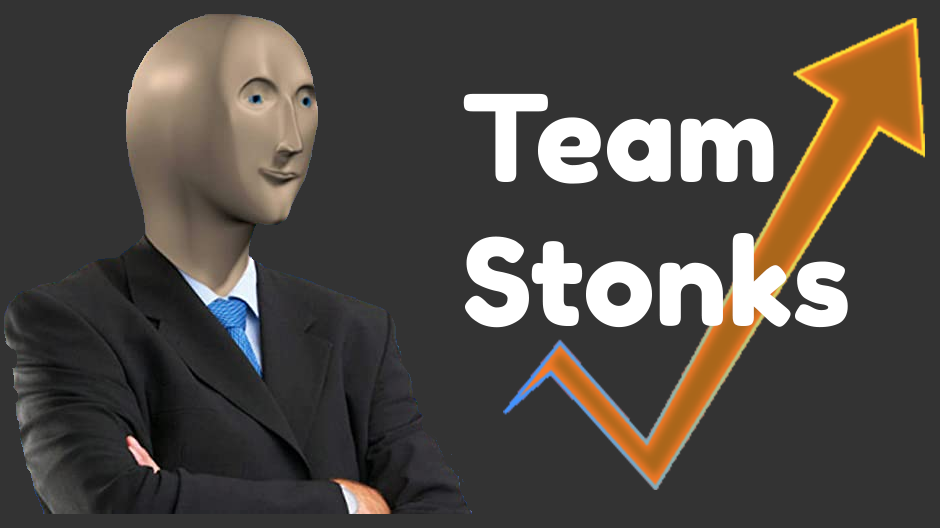
<style>
.page{position:relative;width:940px;height:528px;background:#333333}
.page>*{position:absolute;margin:0}
.t1{font:120px "FredokaOne-Regular";color:#ffffff}
</style>
<div class="page">
<p class="t1" style="left:463px;top:93px;width:385px;height:235px">Team<br>Stonks</p>
</div>
